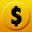
<style>
.page{position:relative;width:32px;height:32px}
.page>*{position:absolute;margin:0}
.t1{font:24px "AbadiMT-CondensedExtraBold";color:#000000;font-weight:bold}
</style>
<div class="page">
<p class="t1" style="left:11px;top:6px;width:11px;height:21px">$</p>
</div>
